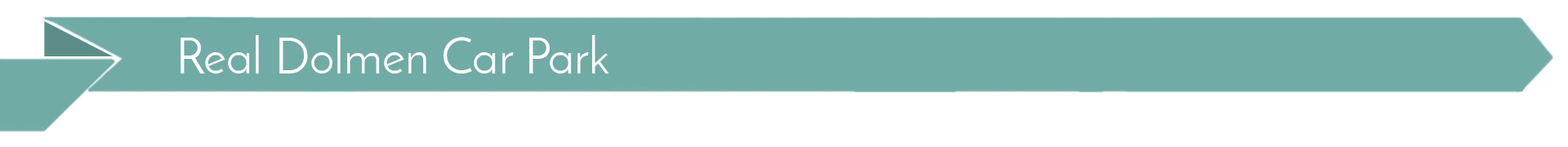
<style>
.page{position:relative;width:1568px;height:147px;background:#ffffff}
.page>*{position:absolute;margin:0}
.t1{font:49.8px "JosefinSans";color:#ffffff}
</style>
<div class="page">
<p class="t1" style="left:180px;top:35px;width:429px;height:39px">Real Dolmen Car Park</p>
</div>
